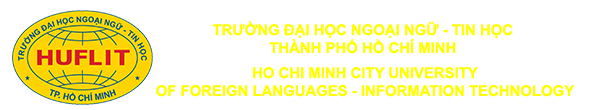
<style>
.page{position:relative;width:600px;height:110px;background:#ffffff}
.page>*{position:absolute;margin:0}
.t1{font:14.9px "Arial-BoldMT";color:#ffff00}
</style>
<div class="page">
<p class="t1" style="left:212px;top:21px;width:301px;height:33px;text-align:center">TRƯỜNG ĐẠI HỌC NGOẠI NGỮ - TIN HỌC<br>THÀNH PHỐ HỒ CHÍ MINH</p>
<p class="t1" style="left:156px;top:67px;width:419px;height:30px;text-align:center">HO CHI MINH CITY UNIVERSITY<br>OF FOREIGN LANGUAGES - INFORMATION TECHNOLOGY</p>
</div>
